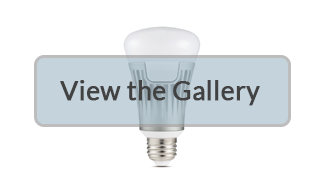
<style>
.page{position:relative;width:320px;height:180px;background:#ffffff}
.page>*{position:absolute;margin:0}
.t1{font:26px "Lato-Regular";color:#424242;font-weight:bold}
</style>
<div class="page">
<p class="t1" style="left:60px;top:80px;width:200px;height:26px">View the Gallery</p>
</div>
